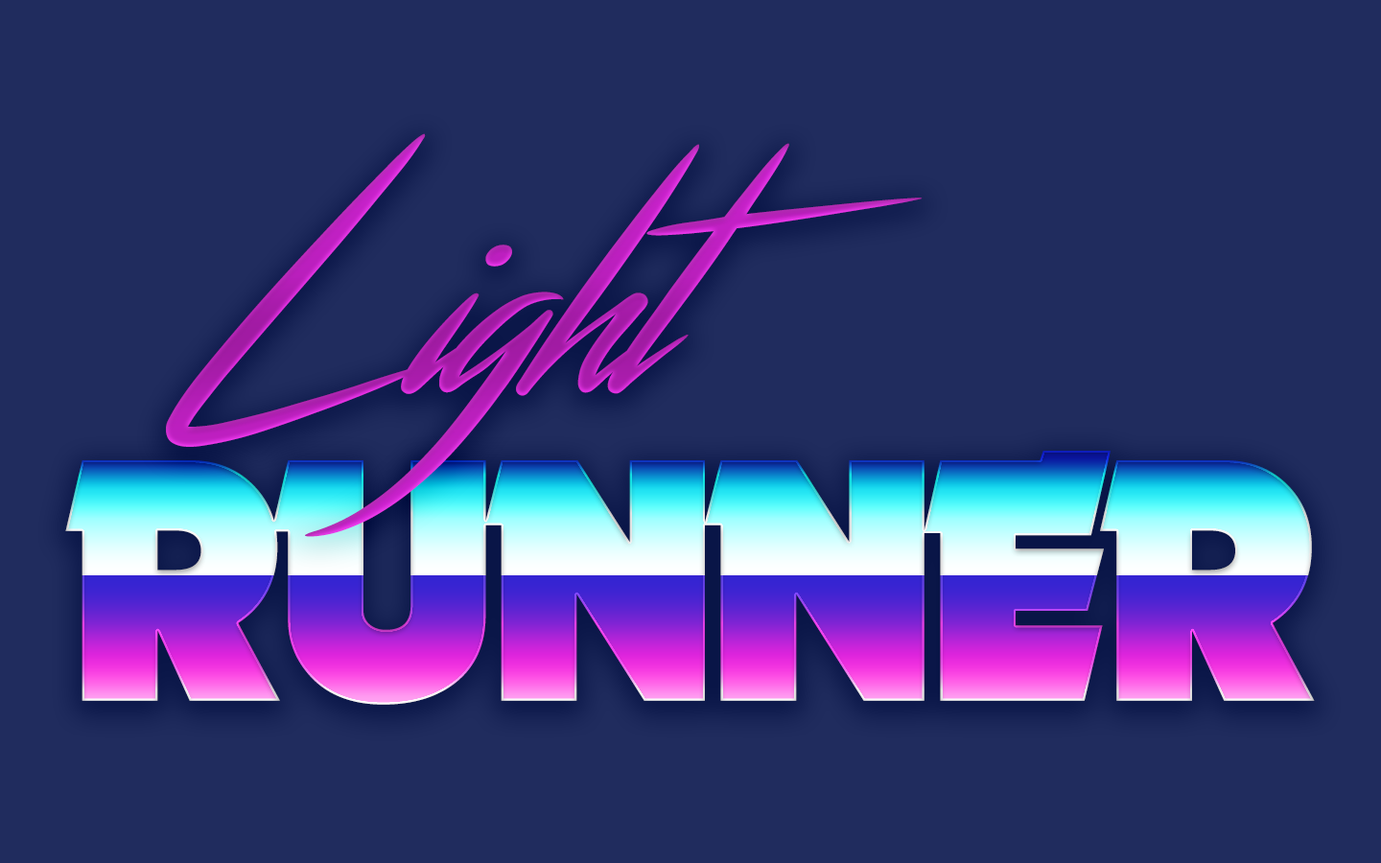
<style>
.page{position:relative;width:1381px;height:863px;background:#202c5e}
.page>*{position:absolute;margin:0}
.t1{font:279.6px "Streamster";letter-spacing:-0.03em;color:#b821ba}
.t2{font:351.3px "Nougat-ExtraBlack";letter-spacing:-0.03em}
</style>
<div class="page">
<p class="t1" style="left:166px;top:133px;width:757px;height:404px">Light</p>
<p class="t2" style="left:65px;top:451px;width:1250px;height:254px">RUNNER</p>
</div>
